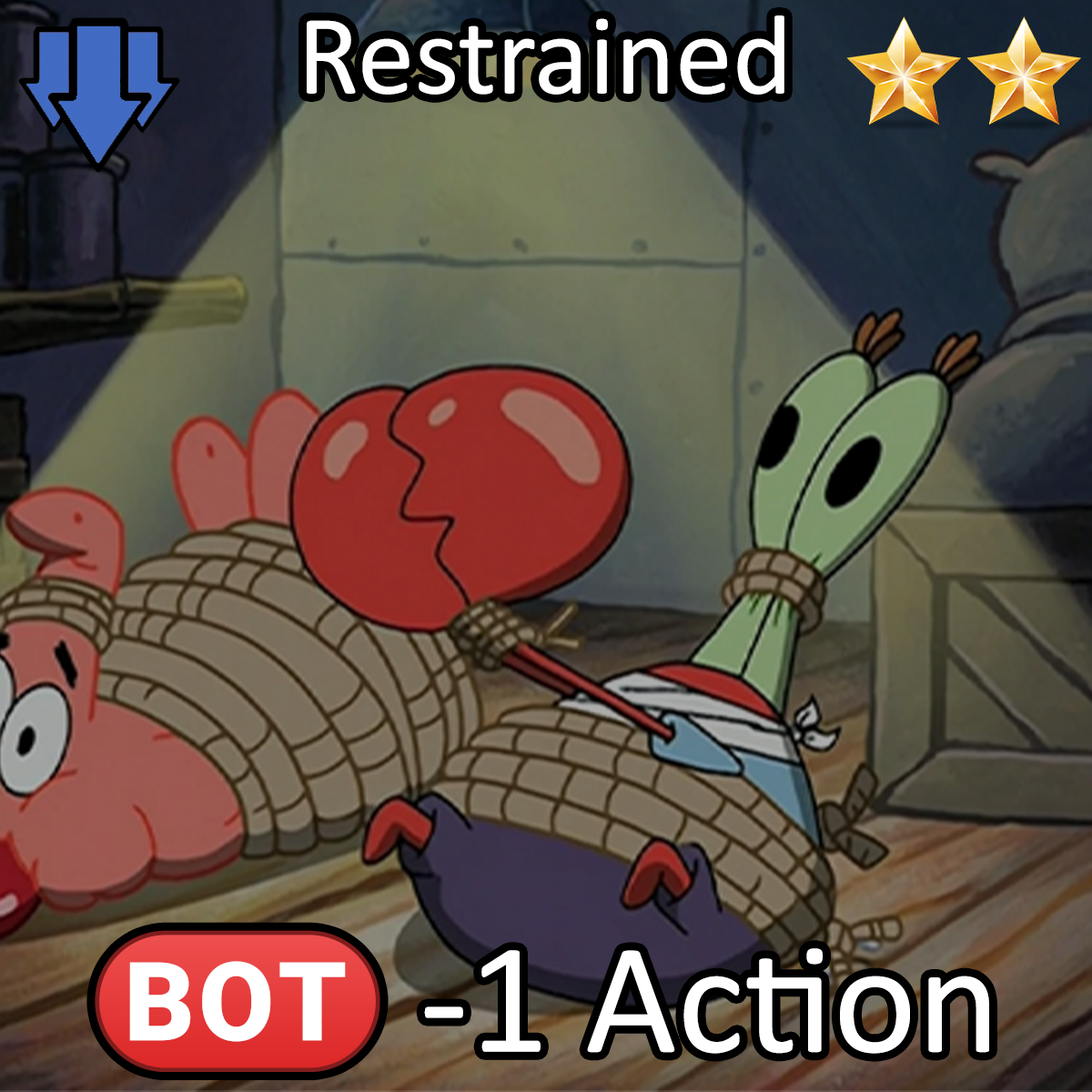
<style>
.page{position:relative;width:1092px;height:1092px}
.page>*{position:absolute;margin:0}
.t1{font:196.6px "Calibri";color:#ffffff}
.t2{font:273px "Calibri"}
.t3{font:247.4px "stoogedings-Regular"}
</style>
<div class="page">
<p class="t1" style="left:307px;top:15px;width:477px;height:80px">Restrained</p>
<p class="t2" style="left:95px;top:930px;width:895px;height:143px"><span class="t3">(BOT)</span> -1 Action</p>
</div>
